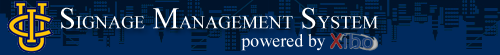
<style>
.page{position:relative;width:500px;height:55px;background:#002a5e}
.page>*{position:absolute;margin:0}
.t1{font:18px "TimesNewRomanPSMT";color:#ffffff}
.t2{font:30px "TimesNewRomanPSMT";color:#ffffff}
</style>
<div class="page">
<p class="t1" style="left:61px;top:7px;width:317px;height:22px"><span class="t2">S</span>IGNAGE<span class="t2"> M</span>ANAGEMENT<span class="t2"> S</span>YSTEM</p>
<p class="t1" style="left:241px;top:34px;width:85px;height:17px">powered by</p>
</div>
